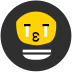
<style>
.page{position:relative;width:72px;height:72px;background:#2f2f2f}
.page>*{position:absolute;margin:0}
.t1{font:13.2px "ZHSRXT--GBK1-0";color:#000000;font-weight:bold}
</style>
<div class="page">
<p class="t1" style="left:32px;top:32px;width:8px;height:10px;rotate:90deg">ω</p>
</div>
